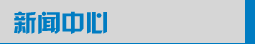
<style>
.page{position:relative;width:255px;height:44px;background:#d6d6d6}
.page>*{position:absolute;margin:0}
.t1{font:24px "HYk2gj";color:#007cc2;text-transform:uppercase}
</style>
<div class="page">
<p class="t1" style="left:14px;top:11px;width:93px;height:23px">新闻中心</p>
</div>
